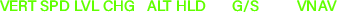
<style>
.page{position:relative;width:350px;height:12px;background:#ffffff}
.page>*{position:absolute;margin:0}
.t1{font:15px "AcuminConcept-Regular";color:#60ff00}
</style>
<div class="page">
<p class="t1" style="left:0px;top:0px;width:70px;height:12px">VERT SPD</p>
<p class="t1" style="left:75px;top:0px;width:60px;height:12px">LVL CHG</p>
<p class="t1" style="left:147px;top:0px;width:59px;height:11px">ALT HLD</p>
<p class="t1" style="left:232px;top:0px;width:27px;height:12px">G/S</p>
<p class="t1" style="left:297px;top:0px;width:40px;height:11px">VNAV</p>
</div>
